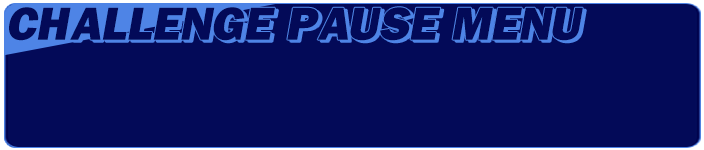
<style>
.page{position:relative;width:704px;height:150px;background:#030a58}
.page>*{position:absolute;margin:0}
.t1{font:48px "FranklinGothic-Heavy";letter-spacing:0.05em;color:#030a58;font-style:italic}
</style>
<div class="page">
<p class="t1" style="left:9px;top:7px;width:574px;height:34px">CHALLENGE PAUSE MENU</p>
</div>
